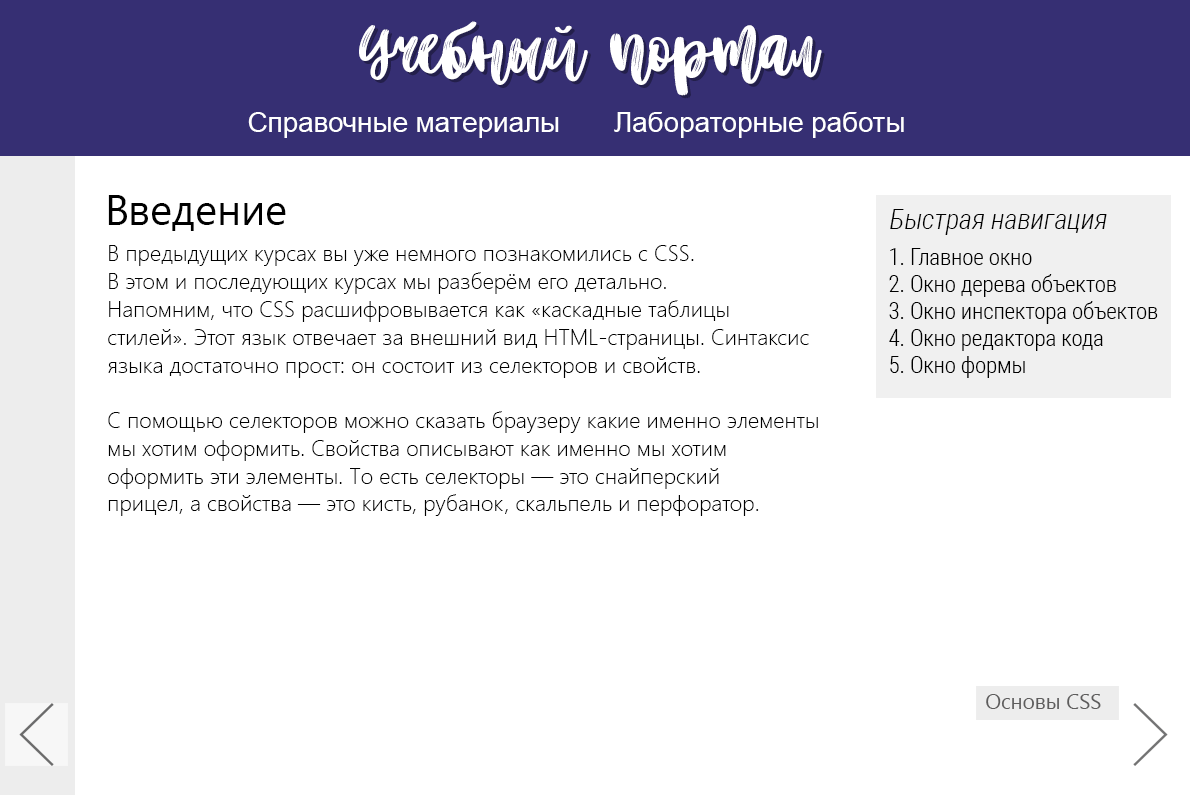
<style>
.page{position:relative;width:1190px;height:795px;background:#ffffff}
.page>*{position:absolute;margin:0}
.t1{font:83.3px "BetterTogether-Script";color:#ffffff}
.t2{font:27.8px "ArialMT";color:#ffffff}
.t3{font:41.7px "SegoeUI";color:#000000}
.t4{font:27.8px "RobotoCondensed-LightItalic";color:#000000}
.t5{font:22.2px/27.8px "SegoeUI-Light";color:#000000}
.t6{font:22.6px "RobotoCondensed-Light";color:#000000}
.t7{font:20.8px "SegoeUI";color:#656464}
</style>
<div class="page">
<p class="t1" style="left:359px;top:21px;width:463px;height:75px">Учебный портал</p>
<p class="t2" style="left:248px;top:112px;width:656px;height:26px">Справочные материалы       Лабораторные работы</p>
<p class="t3" style="left:108px;top:195px;width:178px;height:36px">Введение</p>
<p class="t4" style="left:890px;top:209px;width:217px;height:26px">Быстрая навигация</p>
<p class="t5" style="left:108px;top:245px;width:710px;height:271px">В предыдущих курсах вы уже немного познакомились с CSS.<br>В этом и последующих курсах мы разберём его детально.<br>Напомним, что CSS расшифровывается как «каскадные таблицы<br>стилей». Этот язык отвечает за внешний вид HTML-страницы. Синтаксис<br>языка достаточно прост: он состоит из селекторов и свойств.<br><br>С помощью селекторов можно сказать браузеру какие именно элементы <br>мы хотим оформить. Свойства описывают как именно мы хотим<br>оформить эти элементы. То есть селекторы — это снайперский<br>прицел, а свойства — это кисть, рубанок, скальпель и перфоратор.</p>
<p class="t6" style="left:889px;top:248px;width:269px;height:130px">1. Главное окно<br>2. Окно дерева объектов<br>3. Окно инспектора объектов<br>4. Окно редактора кода<br>5. Окно формы</p>
<p class="t7" style="left:986px;top:694px;width:115px;height:15px">Основы CSS</p>
</div>
